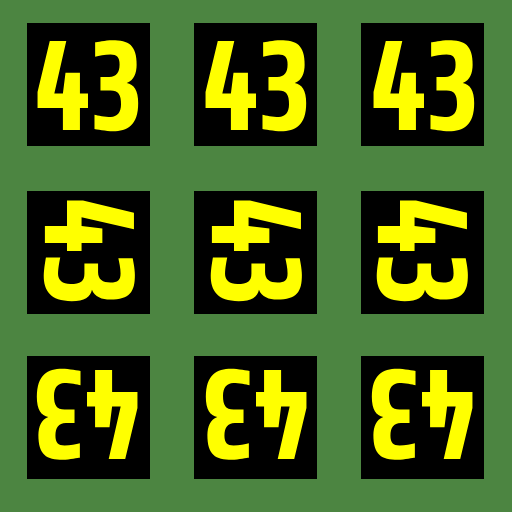
<style>
.page{position:relative;width:512px;height:512px;background:#4c8541}
.page>*{position:absolute;margin:0}
.t1{font:130px "Share-BoldOSF";color:#ffff00}
</style>
<div class="page">
<p class="t1" style="left:37px;top:40px;width:102px;height:92px">43</p>
<p class="t1" style="left:205px;top:40px;width:102px;height:92px">43</p>
<p class="t1" style="left:373px;top:40px;width:102px;height:92px">43</p>
<p class="t1" style="left:43px;top:200px;width:92px;height:102px;rotate:90deg">43</p>
<p class="t1" style="left:210px;top:200px;width:92px;height:102px;rotate:90deg">43</p>
<p class="t1" style="left:376px;top:200px;width:92px;height:102px;rotate:90deg">43</p>
<p class="t1" style="left:36px;top:368px;width:102px;height:92px;rotate:-180deg">43</p>
<p class="t1" style="left:205px;top:368px;width:102px;height:92px;rotate:-180deg">43</p>
<p class="t1" style="left:371px;top:368px;width:102px;height:92px;rotate:-180deg">43</p>
</div>
